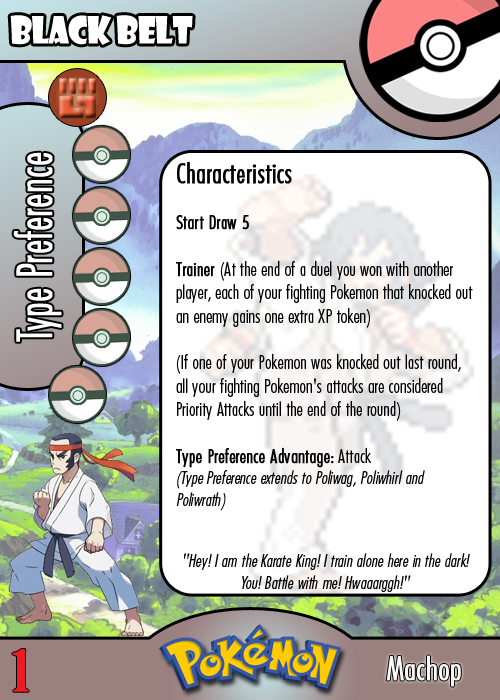
<style>
.page{position:relative;width:500px;height:700px;background:#ffffff}
.page>*{position:absolute;margin:0}
.t1{font:36.7px "ShowcardGothic-Reg";letter-spacing:-0.025em;color:#ffffff;scale:0.91 1}
.t2{font:46.7px "Futura-CondensedLight";color:#ffffff;font-weight:bold;scale:0.83 1}
.t3{font:19.4px "FuturaCondensedBQ-Light";color:#010101}
.t4{font:27.8px "FuturaCondensedBQ-Light";color:#010101;font-weight:bold}
.t5{font:19.4px "FuturaCondensedBQ-Light";color:#010101;font-weight:bold}
.t6{font:18.1px "FuturaCondensedBQ-Light";color:#010101;font-style:italic}
.t7{font:55.6px "BirchStd";color:#ed1c24;font-weight:bold;scale:1.5 1}
.t8{font:33.3px "FuturaCondensedBQ-Light";color:#f9f9f9;font-weight:bold}
</style>
<div class="page">
<p class="t1" style="left:10px;top:15px;width:183px;height:30px">Black belt</p>
<p class="t2" style="left:13px;top:152px;width:49px;height:190px;rotate:-90deg">Type Preference</p>
<p class="t3" style="left:176px;top:162px;width:297px;height:349px"><span class="t4">Characteristics<br></span><span class="t5"><br>Start Draw 5<br><br>Trainer </span>(At the end of a duel you won with another player, each of your fighting Pokemon that knocked out an enemy gains one extra XP token)<br><br>(If one of your Pokemon was knocked out last round, all your fighting Pokemon's attacks are considered Priority Attacks until the end of the round)<br><br><span class="t5">Type Preference Advantage:</span> Attack<br><span class="t6">(Type Preference extends to Poliwag, Poliwhirl and Poliwrath)</span></p>
<p class="t6" style="left:184px;top:553px;width:286px;height:39px;text-align:center">"Hey! I am the Karate King! I train alone here in the dark! You! Battle with me! Hwaaarggh!"</p>
<p class="t7" style="left:12px;top:649px;width:17px;height:43px">1</p>
<p class="t8" style="left:386px;top:655px;width:75px;height:32px">Machop</p>
</div>
